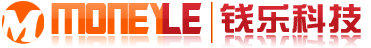
<style>
.page{position:relative;width:371px;height:48px;background:#ffffff}
.page>*{position:absolute;margin:0}
.t1{font:49px "TransformersMovie";scale:0.83 1}
.t2{font:49px "TransformersMovie";color:#bd181f;scale:0.77 1}
.t3{font:32px "DFZongYi-Bd-80-Win-GB";color:#bf1a21;scale:1.12 1}
.t4{font:32px "DFZongYi-Bd-80-Win-GB";scale:1.12 1}
</style>
<div class="page">
<p class="t1" style="left:51px;top:3px;width:119px;height:31px">money</p>
<p class="t2" style="left:162px;top:3px;width:40px;height:31px">le</p>
<p class="t3" style="left:220px;top:3px;width:141px;height:30px">钱乐科技</p>
<p class="t4" style="left:221px;top:35px;width:140px;height:13px">钱乐科技</p>
</div>
